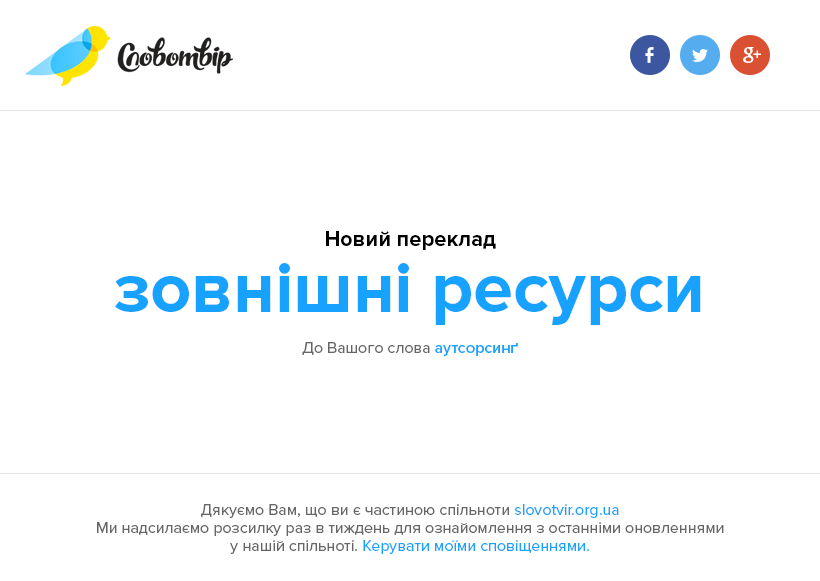
<style>
.page{position:relative;width:820px;height:581px;background:#ffffff}
.page>*{position:absolute;margin:0}
.t1{font:22px "ProximaNova-Bold";color:#000000}
.t2{font:72px "ProximaNova-Bold";color:#17a2ff}
.t3{font:16px "ProximaNova-Regular";color:#666666}
.t4{font:16px "ProximaNova-Semibold";color:#17a2ff}
.t5{font:16px/18px "ProximaNova-Regular";color:#666666}
.t6{font:16px/18px "ProximaNova-Regular";color:#17a2ff}
</style>
<div class="page">
<p class="t1" style="left:326px;top:231px;width:170px;height:19px">Новий переклад</p>
<p class="t2" style="left:115px;top:263px;width:586px;height:62px">зовнішні ресурси</p>
<p class="t3" style="left:302px;top:342px;width:216px;height:14px">До Вашого слова <span class="t4">аутсорсинґ</span></p>
<p class="t5" style="left:97px;top:504px;width:627px;height:50px;text-align:center">Дякуємо Вам, що ви є частиною спільноти <span class="t6">slovotvir.org.ua</span><br>Ми надсилаємо розсилку раз в тиждень для ознайомлення з останніми оновленнями<br>у нашій спільноті. <span class="t6">Керувати моїми сповіщеннями.</span></p>
</div>
